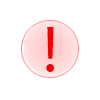
<style>
.page{position:relative;width:100px;height:100px;background:#ffffff}
.page>*{position:absolute;margin:0}
.t1{font:65px "MyriadPro-Regular";color:#f90000}
</style>
<div class="page">
<p class="t1" style="left:46px;top:27px;width:8px;height:45px">!</p>
</div>
